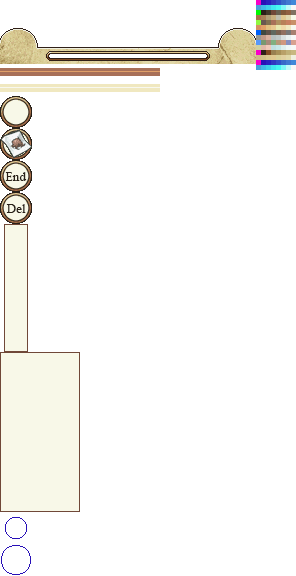
<style>
.page{position:relative;width:296px;height:576px;background:#ffffff}
.page>*{position:absolute;margin:0}
.t1{font:12.6px/32px "TimesNewRomanPSMT";letter-spacing:0.025em;color:#282018}
.t2{font:12.6px/32px "TimesNewRomanPSMT";letter-spacing:0.025em;color:#282018;scale:0.89 1}
</style>
<div class="page">
<p class="t1" style="left:5px;top:172px;width:22px;height:41px;text-align:center"><span class="t2">E</span>nd <br>Del</p>
</div>
